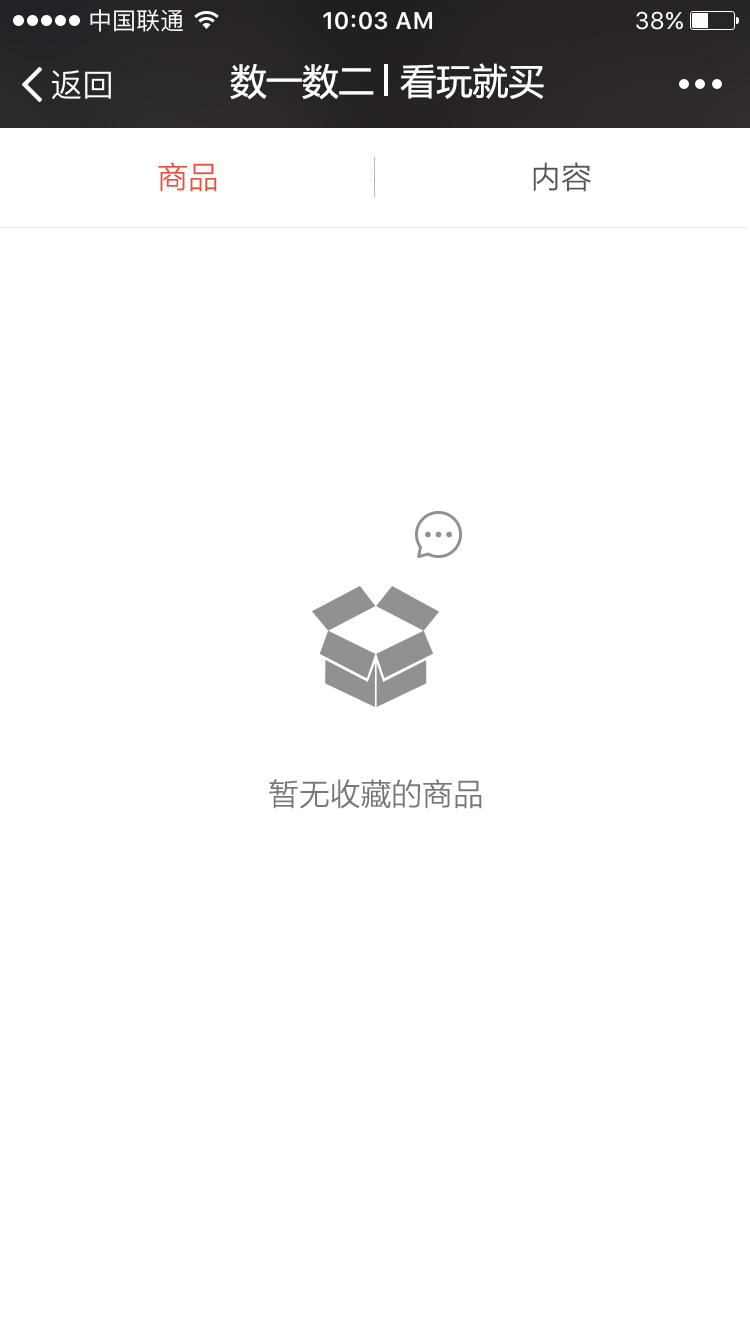
<style>
.page{position:relative;width:750px;height:1334px;background:#ffffff}
.page>*{position:absolute;margin:0}
.t1{font:36px "MicrosoftYaHei";color:#ffffff}
.t2{font:30px "MicrosoftYaHeiLight";color:#ef4f3e;font-weight:bold}
.t3{font:30px "MicrosoftYaHeiLight";color:#555555;font-weight:bold}
.t4{font:30px "MicrosoftYaHeiLight";color:#777777;font-weight:bold}
</style>
<div class="page">
<p class="t1" style="left:230px;top:63px;width:144px;height:37px">数一数二</p>
<p class="t1" style="left:400px;top:63px;width:144px;height:36px">看玩就买</p>
<p class="t2" style="left:158px;top:162px;width:59px;height:30px">商品</p>
<p class="t3" style="left:533px;top:162px;width:58px;height:30px">内容</p>
<p class="t4" style="left:269px;top:779px;width:213px;height:30px">暂无收藏的商品</p>
</div>
